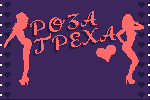
<style>
.page{position:relative;width:150px;height:100px;background:#3c265c}
.page>*{position:absolute;margin:0}
.t1{font:26px/18px "LovelySofiaBG";letter-spacing:0.1em;color:#ff6a6a;scale:1.2 1}
.t2{font:26px/18px "LovelySofiaBG";letter-spacing:0.01em;color:#ff6a6a;scale:1.2 1}
.t3{font:26px/18px "LovelySofiaBG";letter-spacing:0.25em;color:#ff6a6a;scale:1.2 1}
.t4{font:26px/18px "LovelySofiaBG";letter-spacing:0.05em;color:#ff6a6a;scale:1.2 1}
.t5{font:26px/18px "LovelySofiaBG";letter-spacing:0.075em;color:#ff6a6a;scale:1.2 1}
</style>
<div class="page">
<p class="t1" style="left:30px;top:11px;width:86px;height:43px;rotate:-10deg">РО<span class="t2">ЗА <br></span><span class="t3">Г</span><span class="t4">Р</span><span class="t5">Е</span><span class="t4">Х</span>А</p>
</div>
